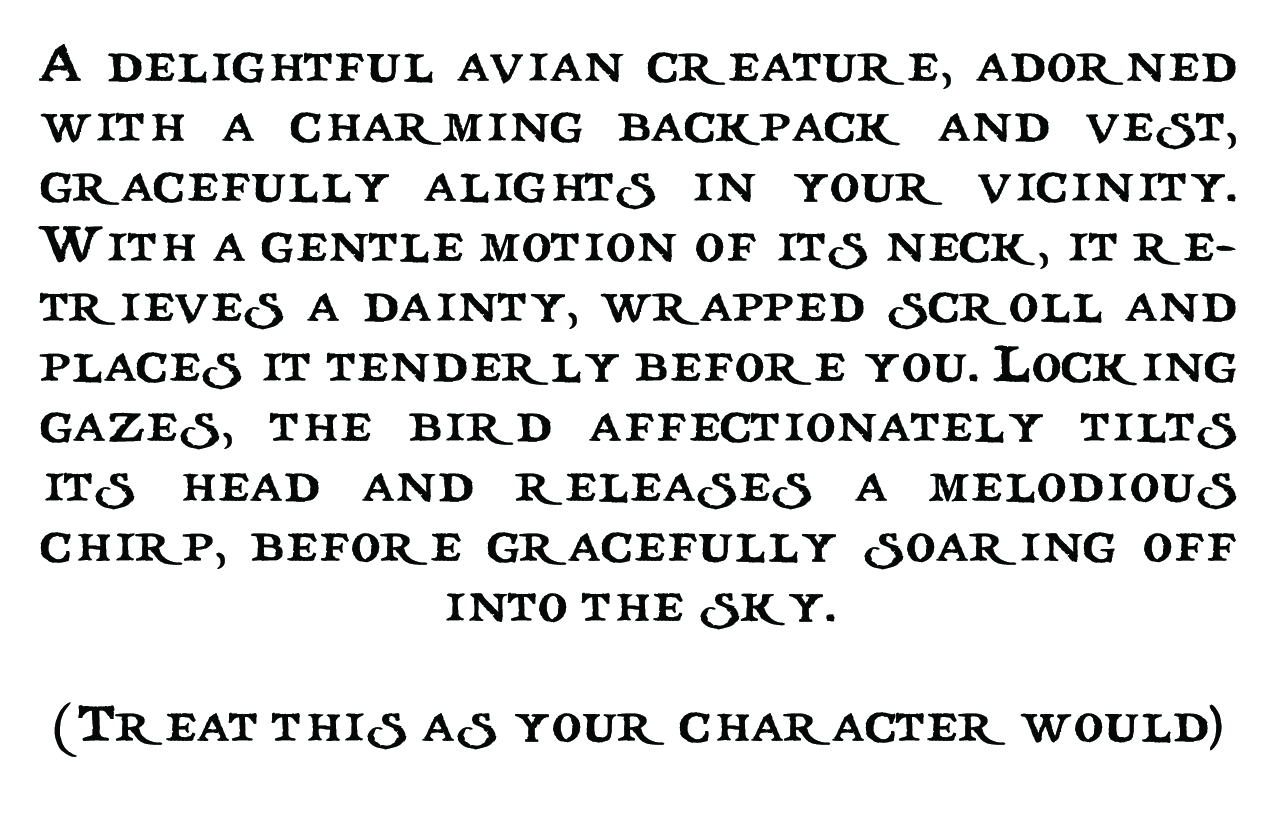
<style>
.page{position:relative;width:1275px;height:825px;background:#ffffff}
.page>*{position:absolute;margin:0}
.t1{font:50px "treasuremap";letter-spacing:-0.01em;color:#060808}
</style>
<div class="page">
<p class="t1" style="left:38px;top:44px;width:1199px;height:713px;text-align:justify">A delightful avian creature, adorned with a charming backpack and vest, gracefully alights in your vicinity. With a gentle motion of its neck, it retrieves a dainty, wrapped scroll and places it tenderly before you. Locking gazes, the bird affectionately tilts its head and releases a melodious chirp, before gracefully soaring off into the sky.<br><br>(Treat this as your character would)</p>
</div>
